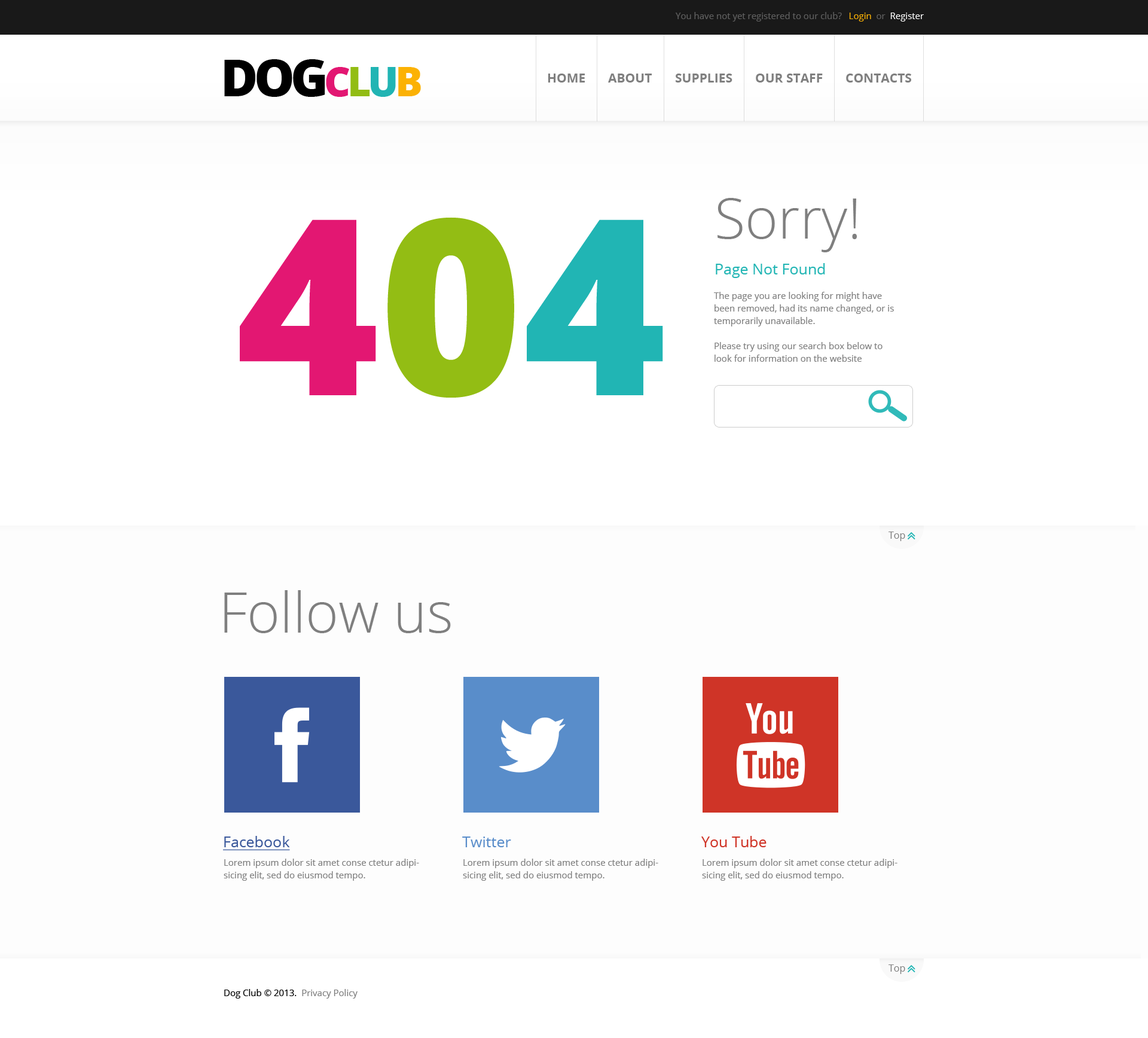
<style>
.page{position:relative;width:1148px;height:1038px;background:#ffffff}
.page>*{position:absolute;margin:0}
.t1{font:9px "OpenSans";color:#5f5f5f}
.t2{font:9px "OpenSans";color:#fcb204}
.t3{font:9px "OpenSans";color:#ffffff}
.t4{font:50.8px "OpenSans-Extrabold";letter-spacing:-0.08em;color:#000000;text-transform:uppercase}
.t5{font:40.7px "OpenSans-Extrabold";letter-spacing:-0.08em;color:#e31772;text-transform:uppercase}
.t6{font:40.7px "OpenSans-Extrabold";letter-spacing:-0.08em;color:#93bd14;text-transform:uppercase}
.t7{font:40.7px "OpenSans-Extrabold";letter-spacing:-0.08em;color:#21b5b4;text-transform:uppercase}
.t8{font:40.7px "OpenSans-Extrabold";letter-spacing:-0.08em;color:#fcb204;text-transform:uppercase}
.t9{font:12.6px "OpenSans-Bold";color:#7f7f7f;text-transform:uppercase}
.t10{font:56.2px "OpenSans-Light";color:#7f7f7f}
.t11{font:245.2px "OpenSans-Extrabold";color:#e31772;text-transform:uppercase}
.t12{font:245.2px "OpenSans-Extrabold";color:#93bd14;text-transform:uppercase}
.t13{font:245.2px "OpenSans-Extrabold";color:#21b5b4;text-transform:uppercase}
.t14{font:15px "OpenSans";color:#21b5b4}
.t15{font:9px/12.6px "OpenSans";color:#7f7f7f}
.t16{font:9.6px "OpenSans";color:#7f7f7f}
.t17{font:15px "OpenSans";color:#3a589b;text-decoration:underline}
.t18{font:15px "OpenSans";color:#598dca}
.t19{font:15px "OpenSans";color:#cf3427}
.t20{font:9px "OpenSans";color:#000000}
.t21{font:9px "OpenSans";color:#7f7f7f}
</style>
<div class="page">
<p class="t1" style="left:676px;top:12px;width:248px;height:10px">You have not yet registered to our club?   <span class="t2">Login</span>  or  <span class="t3">Register</span></p>
<p class="t4" style="left:224px;top:59px;width:101px;height:38px">Dog</p>
<p class="t5" style="left:326px;top:67px;width:95px;height:30px">C<span class="t6">l</span><span class="t7">u</span><span class="t8">b</span></p>
<p class="t9" style="left:548px;top:74px;width:37px;height:9px">Home</p>
<p class="t9" style="left:608px;top:74px;width:44px;height:9px">About</p>
<p class="t9" style="left:676px;top:74px;width:57px;height:9px">Supplies</p>
<p class="t9" style="left:756px;top:74px;width:67px;height:9px">Our Staff</p>
<p class="t9" style="left:846px;top:74px;width:66px;height:9px">Contacts</p>
<p class="t10" style="left:718px;top:198px;width:139px;height:54px">Sorry!</p>
<p class="t11" style="left:240px;top:217px;width:423px;height:181px">4<span class="t12">0</span><span class="t13">4</span></p>
<p class="t14" style="left:716px;top:263px;width:109px;height:15px">Page Not Found</p>
<p class="t15" style="left:714px;top:292px;width:180px;height:70px">The page you are looking for might have been removed, had its name changed, or is temporarily unavailable.<br><br>Please try using our search box below to look for information on the website</p>
<p class="t16" style="left:889px;top:532px;width:17px;height:9px">Top</p>
<p class="t10" style="left:224px;top:590px;width:227px;height:43px">Follow us</p>
<p class="t17" style="left:223px;top:836px;width:67px;height:15px">Facebook</p>
<p class="t18" style="left:462px;top:837px;width:49px;height:11px">Twitter</p>
<p class="t19" style="left:702px;top:836px;width:65px;height:12px">You Tube</p>
<p class="t15" style="left:224px;top:859px;width:195px;height:22px">Lorem ipsum dolor sit amet conse ctetur adipisicing elit, sed do eiusmod tempo.</p>
<p class="t15" style="left:463px;top:859px;width:196px;height:22px">Lorem ipsum dolor sit amet conse ctetur adipisicing elit, sed do eiusmod tempo.</p>
<p class="t15" style="left:702px;top:859px;width:196px;height:22px">Lorem ipsum dolor sit amet conse ctetur adipisicing elit, sed do eiusmod tempo.</p>
<p class="t16" style="left:889px;top:965px;width:17px;height:9px">Top</p>
<p class="t20" style="left:224px;top:989px;width:134px;height:10px">Dog Club © 2013.<span class="t21">  Privacy Policy</span></p>
</div>
